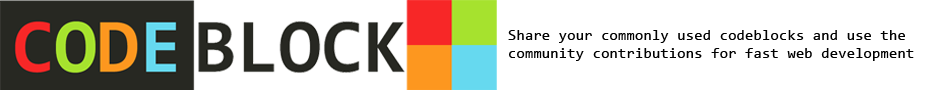
<style>
.page{position:relative;width:928px;height:90px;background:#ffffff}
.page>*{position:absolute;margin:0}
.t1{font:15.4px/18px "Consolas";color:#010101}
</style>
<div class="page">
<p class="t1" style="left:508px;top:30px;width:406px;height:31px">Share your commonly used codeblocks and use the <br>community contributions for fast web development</p>
</div>
